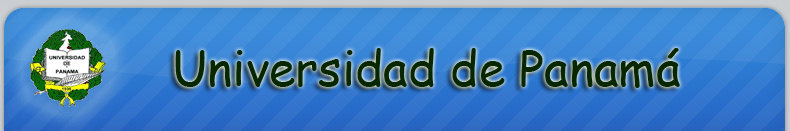
<style>
.page{position:relative;width:790px;height:131px}
.page>*{position:absolute;margin:0}
.t1{font:48px "ComicSansMS";color:#072602}
</style>
<div class="page">
<p class="t1" style="left:175px;top:48px;width:505px;height:40px">Universidad de Panamá</p>
</div>
